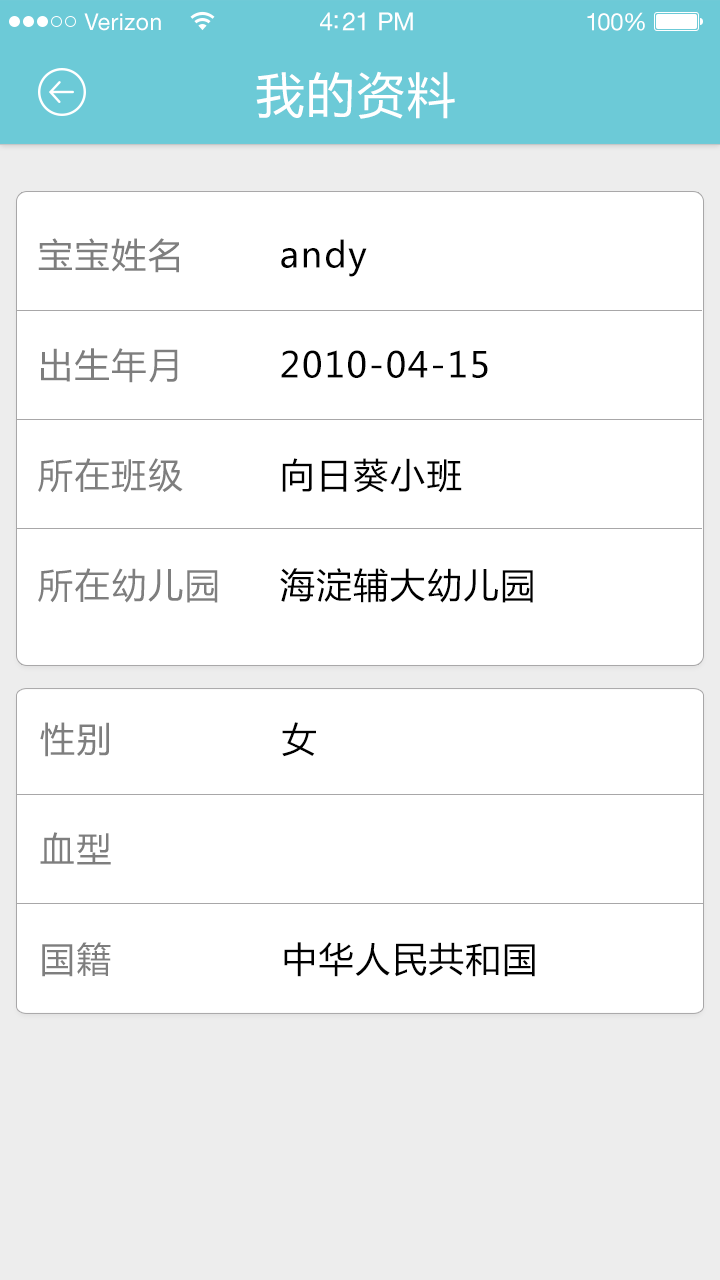
<style>
.page{position:relative;width:720px;height:1280px;background:#ffffff}
.page>*{position:absolute;margin:0}
.t1{font:23px "HelveticaNeueLTStd-Roman";letter-spacing:0.02em;color:#ffffff}
.t2{font:25px "HelveticaNeueLTStd-Roman";letter-spacing:-0.02em;color:#ffffff}
.t3{font:24px "HelveticaNeueLTStd-Roman";letter-spacing:-0.02em;color:#ffffff}
.t4{font:48px "MicrosoftYaHei";letter-spacing:0.05em;color:#ffffff}
.t5{font:35px/110px "MicrosoftYaHei";letter-spacing:0.05em;color:#7e7e7e}
.t6{font:35px/110px "MicrosoftYaHei";letter-spacing:0.05em;color:#000000}
</style>
<div class="page">
<p class="t1" style="left:84px;top:13px;width:77px;height:18px">Verizon</p>
<p class="t2" style="left:320px;top:12px;width:93px;height:19px">4:21 PM</p>
<p class="t3" style="left:587px;top:12px;width:58px;height:19px">100%</p>
<p class="t4" style="left:256px;top:71px;width:199px;height:48px">我的资料</p>
<p class="t5" style="left:38px;top:238px;width:180px;height:365px">宝宝姓名<br>出生年月<br>所在班级<br>所在幼儿园</p>
<p class="t6" style="left:280px;top:239px;width:253px;height:364px">andy<br>2010-04-15<br>向日葵小班<br>海淀辅大幼儿园</p>
<p class="t5" style="left:40px;top:722px;width:71px;height:255px">性别<br>血型<br>国籍</p>
<p class="t6" style="left:282px;top:722px;width:253px;height:255px">女<br><br>中华人民共和国</p>
</div>
